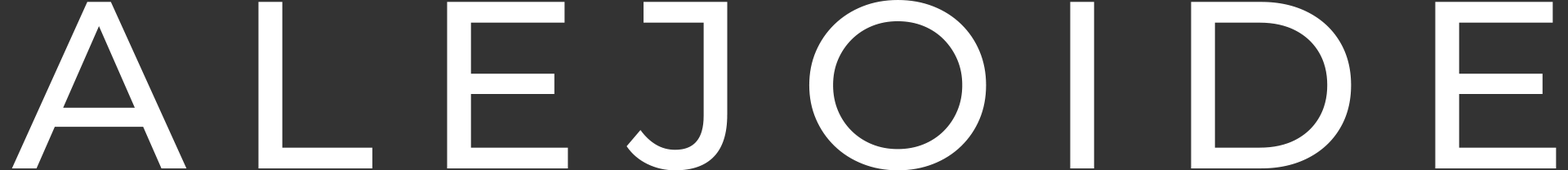
<style>
.page{position:relative;width:1568px;height:170px;background:#333333}
.page>*{position:absolute;margin:0}
.t1{font:237.6px "MontserratRoman-Medium";letter-spacing:0.2em;color:#ffffff}
</style>
<div class="page">
<p class="t1" style="left:11px;top:0px;width:1546px;height:171px">ALEJOIDE</p>
</div>
